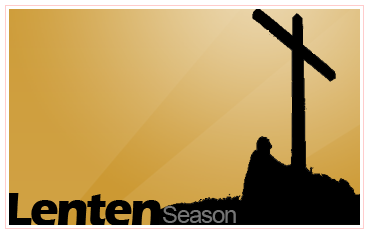
<style>
.page{position:relative;width:370px;height:235px}
.page>*{position:absolute;margin:0}
.t1{font:48px "ErasITC-Bold";letter-spacing:-0.05em;color:#000000}
.t2{font:24px "ArialMT";letter-spacing:-0.05em;color:#757575}
</style>
<div class="page">
<p class="t1" style="left:6px;top:193px;width:155px;height:33px">Lenten</p>
<p class="t2" style="left:163px;top:206px;width:73px;height:17px">Season</p>
</div>
